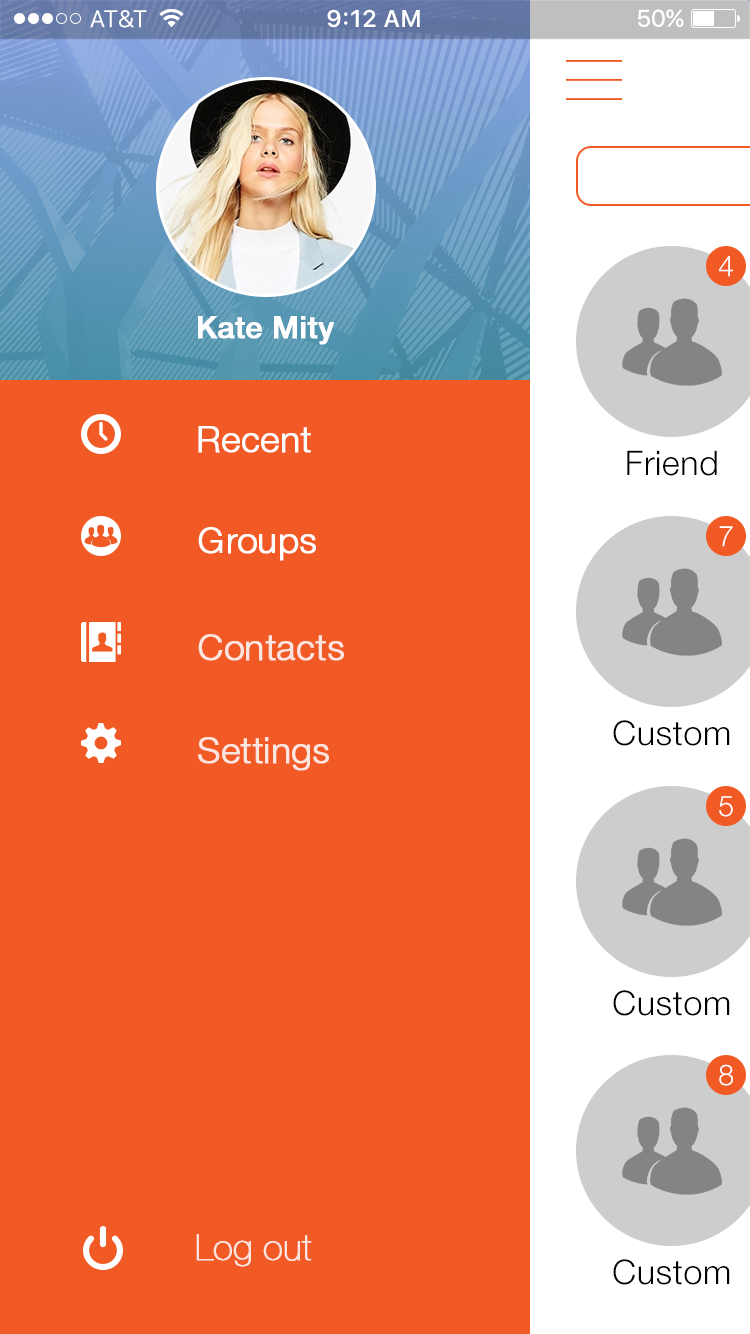
<style>
.page{position:relative;width:750px;height:1334px;background:#f15a24}
.page>*{position:absolute;margin:0}
.t1{font:29px "HelveticaNeueCyr-Light";letter-spacing:0.02em;color:#ffffff}
.t2{font:30px "HelveticaNeueCyr-Medium";color:#ffffff;font-weight:bold}
.t3{font:36px "HelveticaNeueCyr-Light";color:#ffffff;font-weight:bold}
.t4{font:34px "HelveticaNeueCyr-Light";letter-spacing:0.02em;color:#000000}
.t5{font:36px "HelveticaNeueCyr-Light";color:#fce4df;font-weight:bold}
.t6{font:36px "HelveticaNeueCyr-UltraLight";color:#fce4df;font-weight:bold}
</style>
<div class="page">
<p class="t1" style="left:719px;top:256px;width:14px;height:21px">4</p>
<p class="t2" style="left:198px;top:316px;width:137px;height:29px">Kate Mity</p>
<p class="t3" style="left:198px;top:426px;width:113px;height:27px">Recent</p>
<p class="t4" style="left:627px;top:450px;width:90px;height:26px">Friend</p>
<p class="t3" style="left:198px;top:527px;width:118px;height:34px">Groups</p>
<p class="t1" style="left:719px;top:526px;width:14px;height:21px">7</p>
<p class="t5" style="left:198px;top:634px;width:146px;height:27px">Contacts</p>
<p class="t4" style="left:613px;top:720px;width:117px;height:26px">Custom</p>
<p class="t5" style="left:198px;top:737px;width:131px;height:34px">Settings</p>
<p class="t1" style="left:719px;top:796px;width:14px;height:21px">5</p>
<p class="t4" style="left:613px;top:990px;width:117px;height:26px">Custom</p>
<p class="t1" style="left:719px;top:1064px;width:14px;height:22px">8</p>
<p class="t6" style="left:196px;top:1234px;width:116px;height:33px">Log out</p>
<p class="t4" style="left:613px;top:1259px;width:117px;height:26px">Custom</p>
</div>
